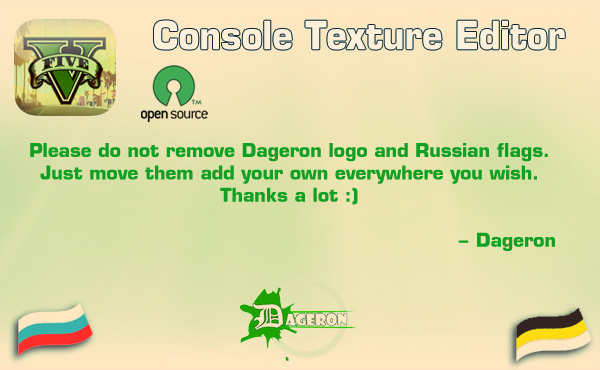
<style>
.page{position:relative;width:600px;height:370px}
.page>*{position:absolute;margin:0}
.t1{font:38.1px "EuropeBold";color:#fff0d9;scale:0.92 1}
.t2{font:18.7px "EuropeBold";color:#0fa024}
</style>
<div class="page">
<p class="t1" style="left:154px;top:20px;width:411px;height:30px">Console Texture Editor</p>
<p class="t2" style="left:30px;top:143px;width:525px;height:108px;text-align:center">Please do not remove Dageron logo and Russian flags.<br>Just move them add your own everywhere you wish.<br>Thanks a lot :)<br><br>- Dageron</p>
</div>
